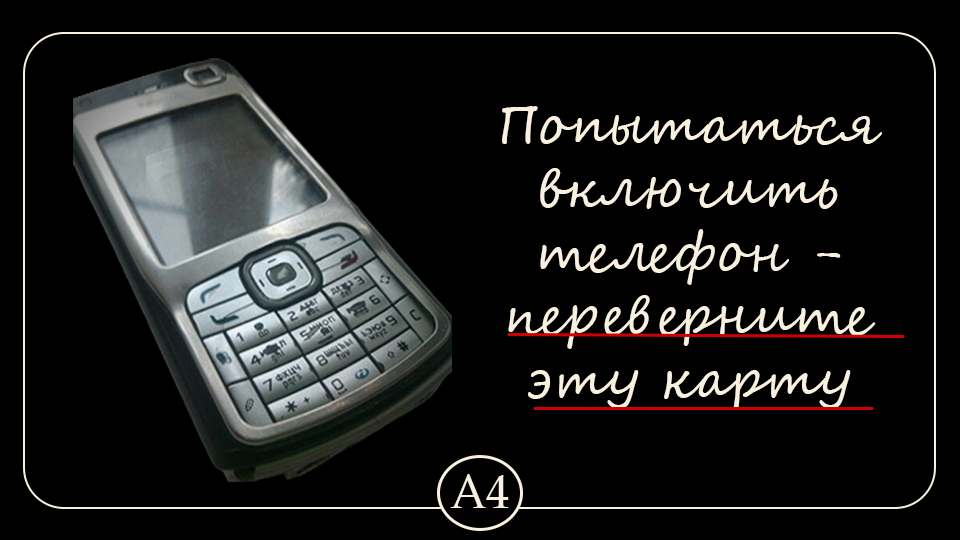
<style>
.page{position:relative;width:960px;height:540px;background:#000000}
.page>*{position:absolute;margin:0}
.t1{font:52.9px "SegoeScript";color:#f9f1de}
.t2{font:46.6px "BookAntiqua";color:#f9f1de}
</style>
<div class="page">
<p class="t1" style="left:502px;top:106px;width:380px;height:304px;text-align:center">Попытаться включить телефон - переверните эту карту</p>
<p class="t2" style="left:450px;top:474px;width:59px;height:34px">A4</p>
</div>
